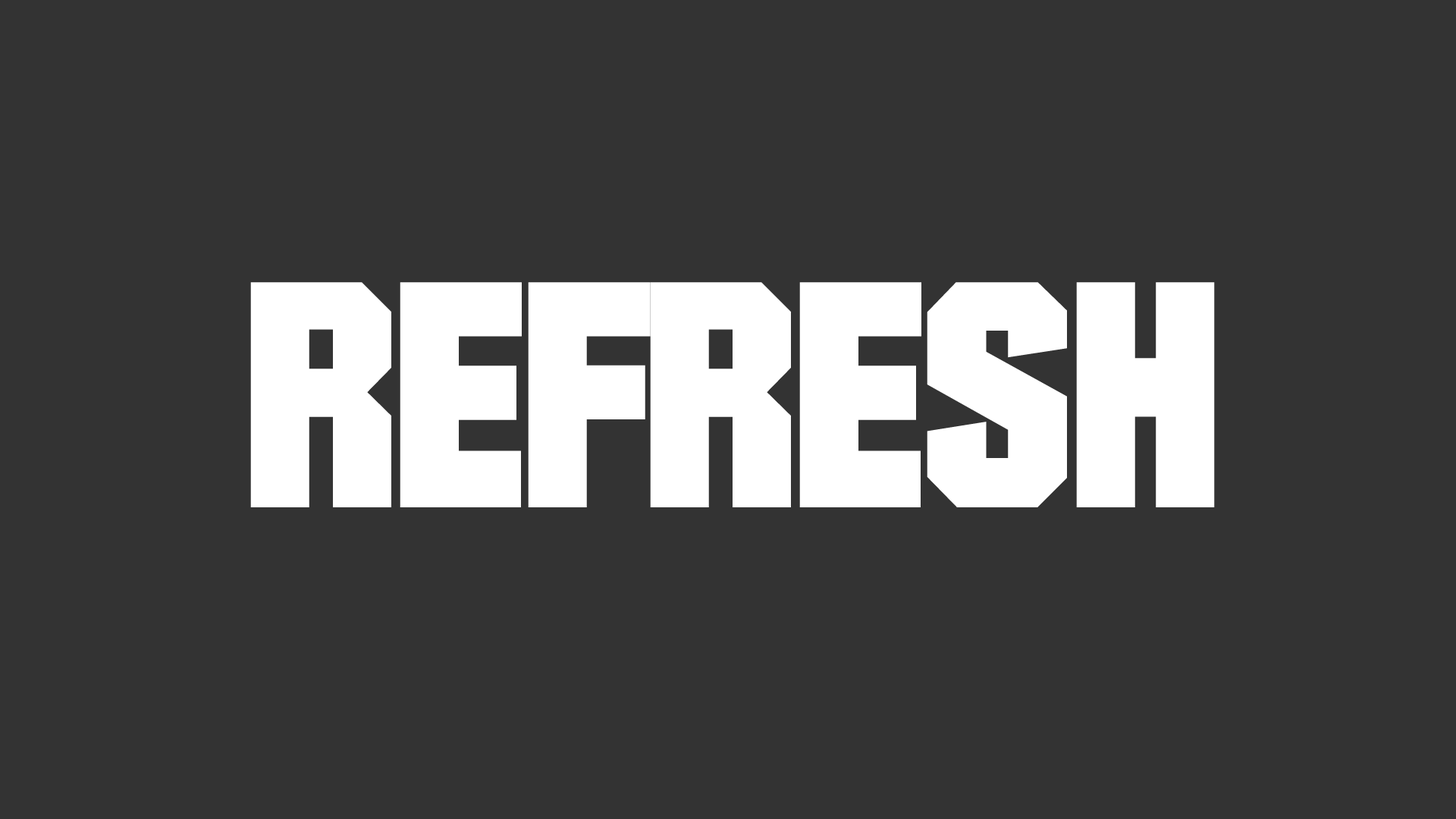
<style>
.page{position:relative;width:1456px;height:819px;background:#333333}
.page>*{position:absolute;margin:0}
.t1{font:312.1px "Diamante-Serial-Heavy-Regular";letter-spacing:-0.03em;color:#ffffff;text-transform:uppercase}
</style>
<div class="page">
<p class="t1" style="left:250px;top:282px;width:965px;height:225px">refresh</p>
</div>
